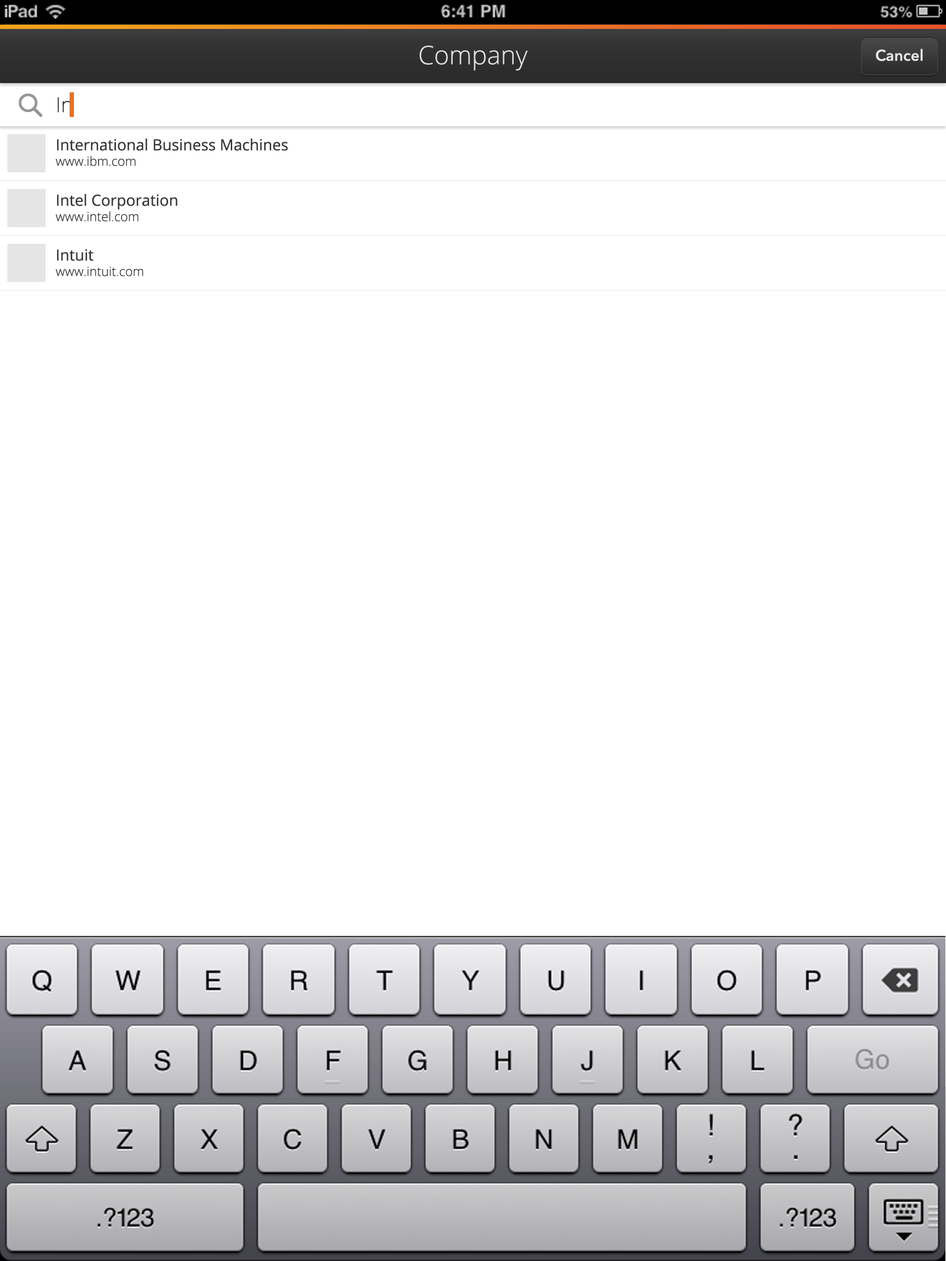
<style>
.page{position:relative;width:946px;height:1261px;background:#ffffff}
.page>*{position:absolute;margin:0}
.t1{font:25.7px "OpenSans-Light";color:#e5e5e5}
.t2{font:15.4px "AvenirNext-DemiBold";color:#e5e5e5}
.t3{font:20.5px "OpenSans-Light";color:#343434}
.t4{font:15.4px "OpenSans";color:#343434}
.t5{font:12.8px "OpenSans-Light";color:#343434}
</style>
<div class="page">
<p class="t1" style="left:419px;top:46px;width:109px;height:25px">Company</p>
<p class="t2" style="left:875px;top:49px;width:47px;height:13px">Cancel</p>
<p class="t3" style="left:57px;top:97px;width:14px;height:16px">In</p>
<p class="t4" style="left:55px;top:139px;width:233px;height:27px">International Business Machines<br><span class="t5">www.ibm.com</span></p>
<p class="t4" style="left:55px;top:194px;width:122px;height:28px">Intel Corporation<br><span class="t5">www.intel.com</span></p>
<p class="t5" style="left:55px;top:249px;width:88px;height:27px"><span class="t4">Intuit<br></span>www.intuit.com</p>
</div>
